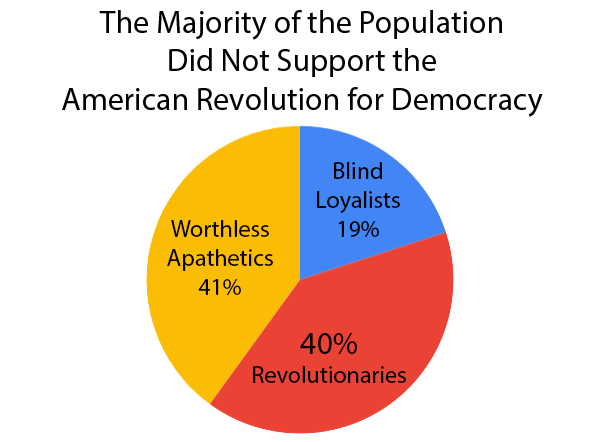
<style>
.page{position:relative;width:611px;height:442px;background:#ffffff}
.page>*{position:absolute;margin:0}
.t1{font:32px "MyriadPro-Regular";color:#000000}
.t2{font:24px "MyriadPro-Regular";color:#000000}
</style>
<div class="page">
<p class="t1" style="left:62px;top:10px;width:481px;height:107px;text-align:center">The Majority of the Population<br>Did Not Support the<br>American Revolution for Democracy</p>
<p class="t2" style="left:317px;top:162px;width:83px;height:75px;text-align:center">Blind<br>Loyalists<br>19%</p>
<p class="t2" style="left:167px;top:220px;width:106px;height:75px;text-align:center">Worthless<br>Apathetics<br>41%</p>
<p class="t2" style="left:253px;top:333px;width:153px;height:50px;text-align:center"><span class="t1">40%<br></span>Revolutionaries</p>
</div>
